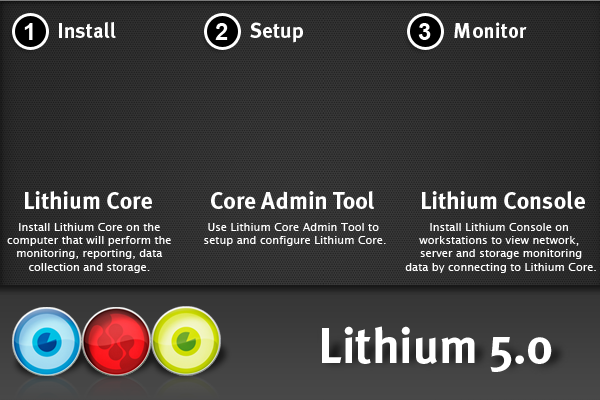
<style>
.page{position:relative;width:600px;height:400px}
.page>*{position:absolute;margin:0}
.t1{font:24px "Arial-BoldMT";color:#ffffff}
.t2{font:21.4px "MetaPlusBold-Roman";color:#ffffff}
.t3{font:24px "MetaPlusBold-Roman";color:#ffffff}
.t4{font:11px "LucidaGrande";color:#ffffff}
.t5{font:49.3px "MetaPlusBold-Roman";color:#ffffff}
</style>
<div class="page">
<p class="t1" style="left:24px;top:23px;width:9px;height:17px">1</p>
<p class="t2" style="left:59px;top:22px;width:57px;height:16px">Install</p>
<p class="t1" style="left:215px;top:23px;width:13px;height:17px">2</p>
<p class="t2" style="left:250px;top:22px;width:53px;height:21px">Setup</p>
<p class="t1" style="left:418px;top:23px;width:13px;height:17px">3</p>
<p class="t2" style="left:454px;top:22px;width:73px;height:16px">Monitor</p>
<p class="t3" style="left:25px;top:191px;width:127px;height:18px">Lithium Core</p>
<p class="t3" style="left:211px;top:191px;width:163px;height:18px">Core Admin Tool</p>
<p class="t3" style="left:422px;top:191px;width:163px;height:18px">Lithium Console</p>
<p class="t4" style="left:7px;top:223px;width:164px;height:50px;text-align:center">Install Lithium Core on the <br>computer that will perform the <br>monitoring, reporting, data <br>collection and storage.</p>
<p class="t4" style="left:204px;top:223px;width:182px;height:23px;text-align:center">Use Lithium Core Admin Tool to <br>setup and configure Lithium Core.</p>
<p class="t4" style="left:405px;top:223px;width:191px;height:50px;text-align:center">Install Lithium Console on <br>workstations to view network, <br>server and storage monitoring<br>data by connecting to Lithium Core.</p>
<p class="t5" style="left:322px;top:326px;width:230px;height:46px">Lithium 5.0</p>
</div>
